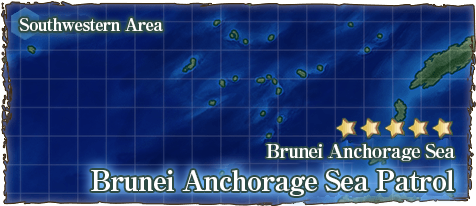
<style>
.page{position:relative;width:476px;height:206px}
.page>*{position:absolute;margin:0}
.t1{font:17px "RyuminPro-ExBold";letter-spacing:-0.04em;color:#ffffff}
.t2{font:19px "RyuminPro-ExBold";letter-spacing:-0.04em;color:#ffffff}
.t3{font:28px "RyuminPro-ExBold";letter-spacing:-0.04em;color:#ffffff}
</style>
<div class="page">
<p class="t1" style="left:19px;top:18px;width:144px;height:14px">Southwestern Area</p>
<p class="t2" style="left:266px;top:143px;width:189px;height:18px">Brunei Anchorage Sea</p>
<p class="t3" style="left:91px;top:170px;width:363px;height:26px">Brunei Anchorage Sea Patrol</p>
</div>
